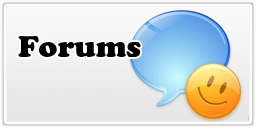
<style>
.page{position:relative;width:256px;height:128px}
.page>*{position:absolute;margin:0}
.t1{font:30px "CooperBlackStd";color:#000000}
</style>
<div class="page">
<p class="t1" style="left:18px;top:36px;width:123px;height:22px">Forums</p>
</div>
